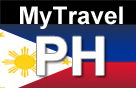
<style>
.page{position:relative;width:136px;height:88px;background:#ffffff}
.page>*{position:absolute;margin:0}
.t1{font:24.5px "Arial-BoldMT";color:#ffffff}
.t2{font:53.6px "Arial-BoldMT";color:#ffffff}
</style>
<div class="page">
<p class="t1" style="left:20px;top:6px;width:103px;height:23px">MyTravel</p>
<p class="t2" style="left:37px;top:36px;width:67px;height:39px">PH</p>
</div>
